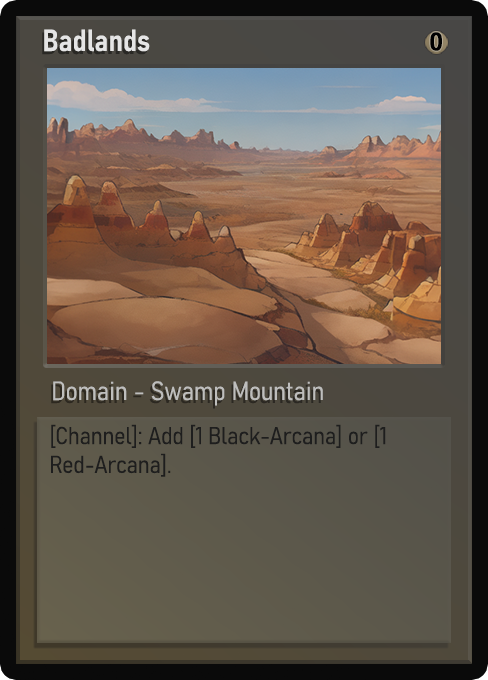
<style>
.page{position:relative;width:488px;height:680px}
.page>*{position:absolute;margin:0}
.t1{font:30px "Bahnschrift-SemiBoldSemiCondensed";color:#f2f2f2;font-weight:bold}
.t2{font:25px "WTRRoycroft";color:#000000;font-weight:bold;scale:1.09 1}
.t3{font:26px "Bahnschrift-LightSemiCondensed";color:#c8c8c8;font-weight:bold}
.t4{font:24px "Bahnschrift-LightSemiCondensed";color:#1e1e1e;font-weight:bold}
</style>
<div class="page">
<p class="t1" style="left:44px;top:29px;width:106px;height:23px;opacity:0.9">Badlands</p>
<p class="t2" style="left:430px;top:32px;width:12px;height:19px">0</p>
<p class="t3" style="left:53px;top:381px;width:270px;height:25px;opacity:0.9">Domain - Swamp Mountain</p>
<p class="t4" style="left:51px;top:424px;width:335px;height:53px">[Channel]: Add [1 Black-Arcana] or [1 Red-Arcana].</p>
</div>
